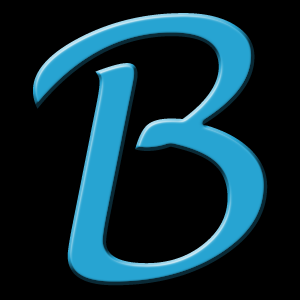
<style>
.page{position:relative;width:300px;height:300px;background:#000000}
.page>*{position:absolute;margin:0}
.t1{font:347.2px "LucidaHandwriting-Italic";color:#27a4d2}
</style>
<div class="page">
<p class="t1" style="left:33px;top:13px;width:235px;height:273px">B</p>
</div>
